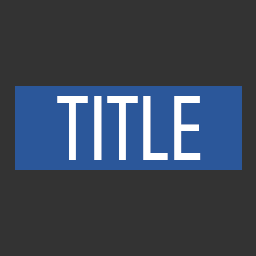
<style>
.page{position:relative;width:256px;height:256px;background:#333333}
.page>*{position:absolute;margin:0}
.t1{font:80px "RakeslyBk-Regular";letter-spacing:0.02em;color:#ffffff;text-transform:uppercase}
</style>
<div class="page">
<p class="t1" style="left:57px;top:96px;width:144px;height:64px">Title</p>
</div>
